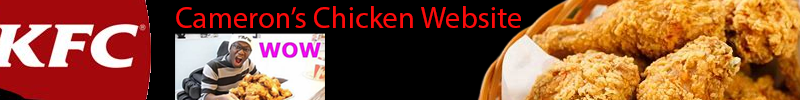
<style>
.page{position:relative;width:800px;height:100px;background:#000000}
.page>*{position:absolute;margin:0}
.t1{font:30.5px "MyriadPro-Regular";color:#fb0b0b}
</style>
<div class="page">
<p class="t1" style="left:176px;top:6px;width:345px;height:22px">Cameron’s Chicken Website</p>
</div>
